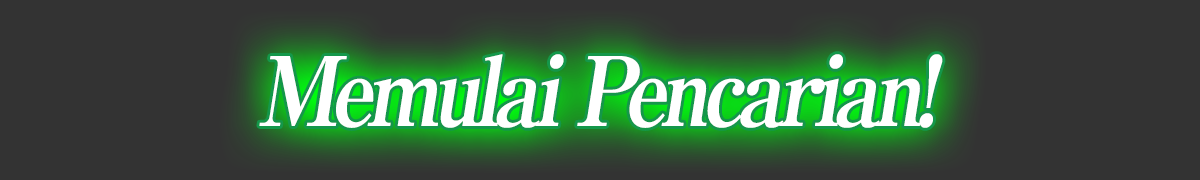
<style>
.page{position:relative;width:1200px;height:180px;background:#333333}
.page>*{position:absolute;margin:0}
.t1{font:96px "RyuminPro-ExBold";letter-spacing:-0.08em;color:#ffffff;font-style:italic;scale:0.9 1}
</style>
<div class="page">
<p class="t1" style="left:259px;top:54px;width:684px;height:74px">Memulai Pencarian!</p>
<p class="t1" style="left:259px;top:54px;width:684px;height:74px">Memulai Pencarian!</p>
</div>
